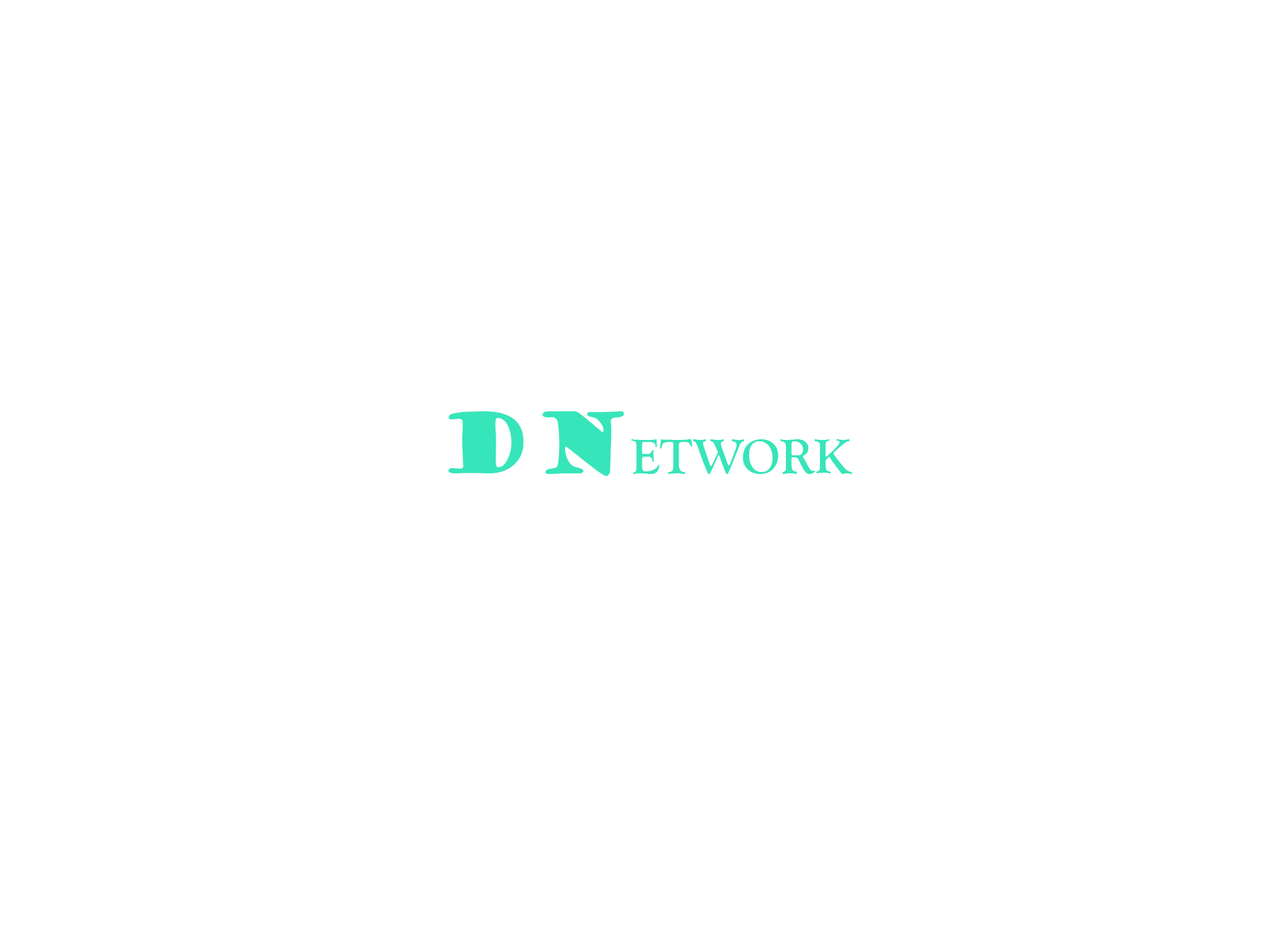
<style>
.page{position:relative;width:1261px;height:946px;background:#ffffff}
.page>*{position:absolute;margin:0}
.t1{font:50px "GoudyOldStyleT-Bold";color:#37e5ba}
.t2{font:83.4px "GoudyStout";color:#37e5ba}
</style>
<div class="page">
<p class="t1" style="left:448px;top:411px;width:405px;height:65px"><span class="t2">Dn</span>ETWORK</p>
</div>
